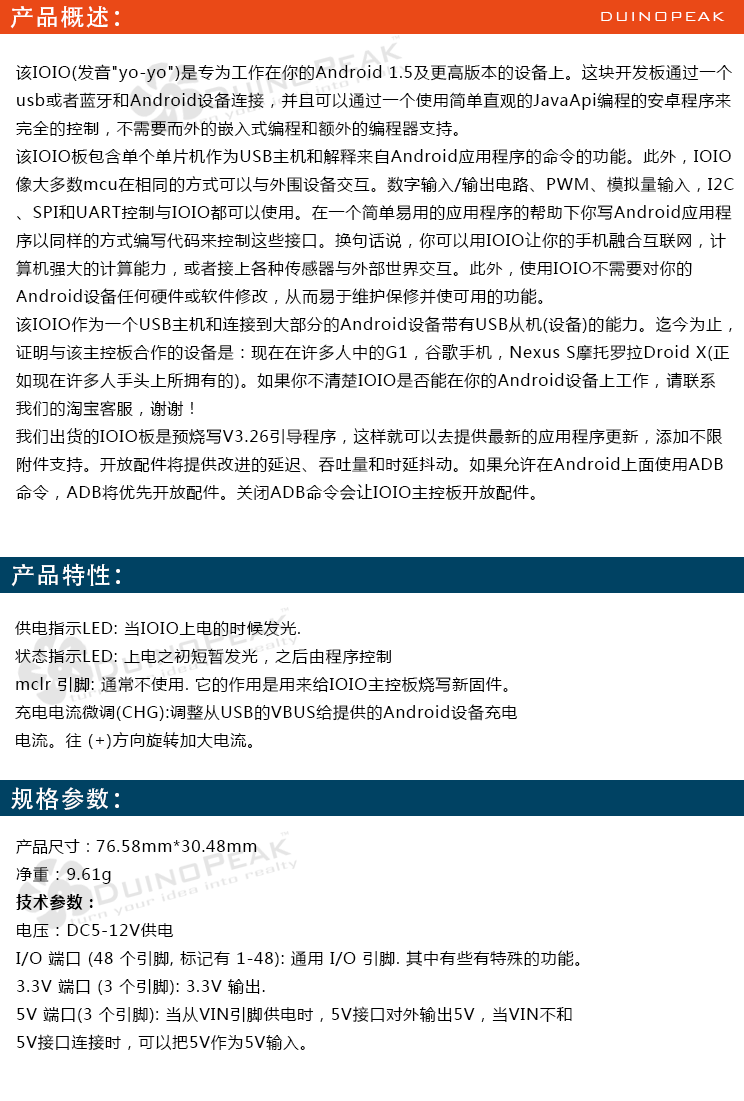
<style>
.page{position:relative;width:744px;height:1101px;background:#ffffff}
.page>*{position:absolute;margin:0}
.t1{font:24px "AdobeHeitiStd-Regular";letter-spacing:0.05em;color:#ffffff}
.t2{font:18px "BankGothicBT-Light";letter-spacing:0.05em;color:#ffffff}
.t3{font:16px "MicrosoftYaHei";letter-spacing:0.05em;color:#000000}
.t4{font:16px "MicrosoftYaHei";color:#000000}
.t5{font:16px "MicrosoftYaHei-Bold";letter-spacing:0.05em;color:#000000}
</style>
<div class="page">
<p class="t1" style="left:10px;top:6px;width:109px;height:23px">产品概述：</p>
<p class="t2" style="left:601px;top:12px;width:124px;height:9px">DUINOPEAK</p>
<p class="t3" style="left:16px;top:64px;width:718px;height:437px">该IOIO(发音"yo-yo")是专为工作在你的Android 1.5及更高版本的设备上。这块开发板通过一个<br>usb或者蓝牙和Android设备连接，并且可以通过一个使用简单直观的JavaApi编程的安卓程序来<br>完全的控制，不需要而外的嵌入式编程和额外的编程器支持。<br>该IOIO板包含单个单片机作为USB主机和解释来自Android应用程序的命令的功能。此外，IOIO<br>像大多数mcu在相同的方式可以与外围设备交互。数字输入/输出电路、PWM、模拟量输入，I2C<br>、SPI和UART控制与IOIO都可以使用。在一个简单易用的应用程序的帮助下你写Android应用程<br>序以同样的方式编写代码来控制这些接口。换句话说，你可以用IOIO让你的手机融合互联网，计<br>算机强大的计算能力，或者接上各种传感器与外部世界交互。此外，使用IOIO不需要对你的<br>Android设备任何硬件或软件修改，从而易于维护保修并使可用的功能。<br>该IOIO作为一个USB主机和连接到大部分的Android设备带有USB从机(设备)的能力。迄今为止，<br>证明与该主控板合作的设备是：现在在许多人中的G1，谷歌手机，Nexus S摩托罗拉Droid X(正<br>如现在许多人手头上所拥有的)。如果你不清楚IOIO是否能在你的Android设备上工作，请联系<br>我们的淘宝客服，谢谢！<br>我们出货的IOIO板是预烧写V3.26引导程序，这样就可以去提供最新的应用程序更新，添加不限<br>附件支持。开放配件将提供改进的延迟、吞吐量和时延抖动。如果允许在Android上面使用ADB<br>命令，ADB将优先开放配件。关闭ADB命令会让IOIO主控板开放配件。</p>
<p class="t1" style="left:11px;top:563px;width:109px;height:24px">产品特性：</p>
<p class="t3" style="left:15px;top:621px;width:503px;height:128px">供电指示LED: 当IOIO上电的时候发光.<br>状态指示LED: 上电之初短暂发光，之后由程序控制<br>mclr 引脚: 通常不使用. 它的作用是用来给IOIO主控板烧写新固件。<br>充电电流微调(CHG):调整从USB的VBUS给提供的Android设备充电<br>电流。往 (+)方向旋转加大电流。</p>
<p class="t1" style="left:11px;top:787px;width:108px;height:23px">规格参数：</p>
<p class="t3" style="left:16px;top:839px;width:564px;height:211px"><span class="t4">产品尺寸：</span>76.58mm*30.48mm<br>净重：9.61g<br><span class="t5">技术参数：<br></span>电压：DC5-12V供电<br>I/O 端口 (48 个引脚, 标记有 1-48): 通用 I/O 引脚. 其中有些有特殊的功能。<br>3.3V 端口 (3 个引脚): 3.3V 输出.<br>5V 端口(3 个引脚): 当从VIN引脚供电时，5V接口对外输出5V，当VIN不和<br>5V接口连接时，可以把5V作为5V输入。</p>
</div>
